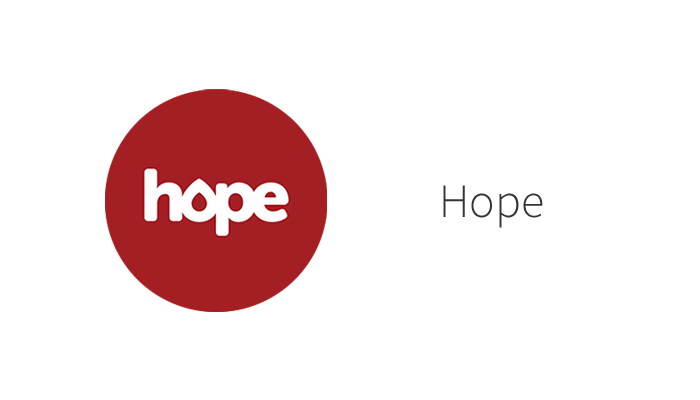
<style>
.page{position:relative;width:700px;height:400px;background:#ffffff}
.page>*{position:absolute;margin:0}
.t1{font:48px "SourceSansPro-Light";color:#333333}
</style>
<div class="page">
<p class="t1" style="left:443px;top:185px;width:100px;height:43px">Hope</p>
</div>
